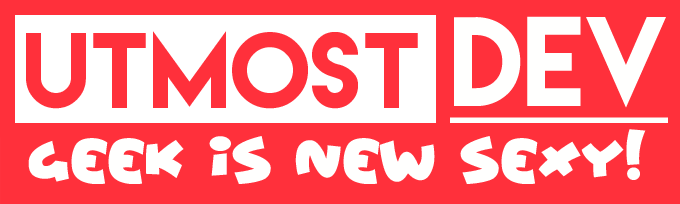
<style>
.page{position:relative;width:680px;height:204px;background:#ff303b}
.page>*{position:absolute;margin:0}
.t1{font:112.5px "LemonMilk";color:#fffffe;text-decoration:underline}
.t2{font:95.8px "LemonMilk";color:#ff303b}
.t3{font:50px "Wowsers";color:#fffffe}
</style>
<div class="page">
<p class="t1" style="left:450px;top:16px;width:218px;height:107px">DEV</p>
<p class="t2" style="left:26px;top:31px;width:392px;height:78px">UTmost</p>
<p class="t3" style="left:28px;top:129px;width:618px;height:55px">GEEK IS NEW SEXY!</p>
</div>
